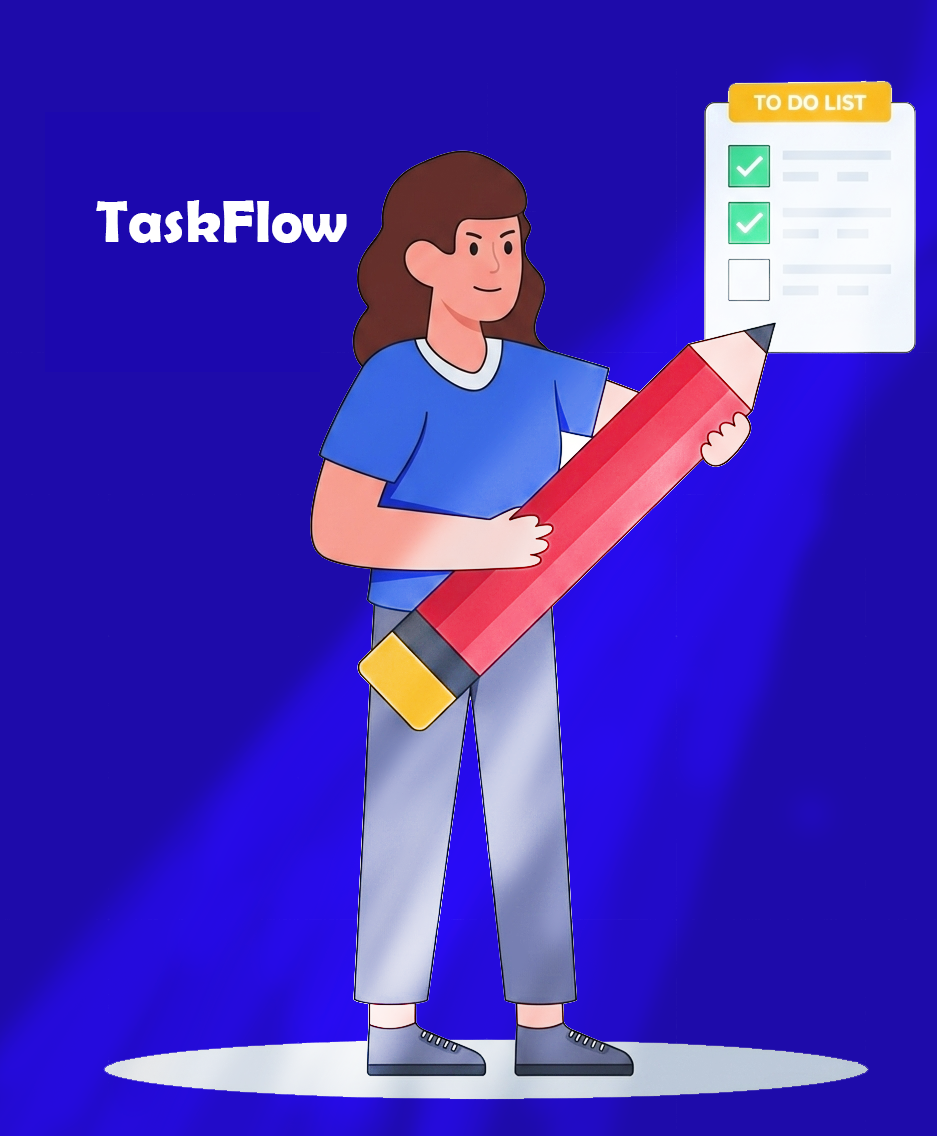
<style>
.page{position:relative;width:937px;height:1136px;background:#1e0baa}
.page>*{position:absolute;margin:0}
.t1{font:60px "BerlinSansFBDemi-Bold";color:#ffffff}
</style>
<div class="page">
<p class="t1" style="left:96px;top:200px;width:251px;height:43px">TaskFlow</p>
</div>
